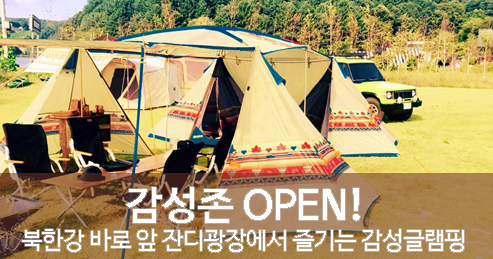
<style>
.page{position:relative;width:493px;height:259px}
.page>*{position:absolute;margin:0}
.t1{font:40px "NanumBarunGothicBold";color:#ffffff}
.t2{font:24px "NanumBarunGothic";color:#ffffff}
</style>
<div class="page">
<p class="t1" style="left:126px;top:187px;width:234px;height:36px">감성존 OPEN!</p>
<p class="t2" style="left:22px;top:229px;width:442px;height:23px">북한강 바로 앞 잔디광장에서 즐기는 감성글램핑</p>
</div>
